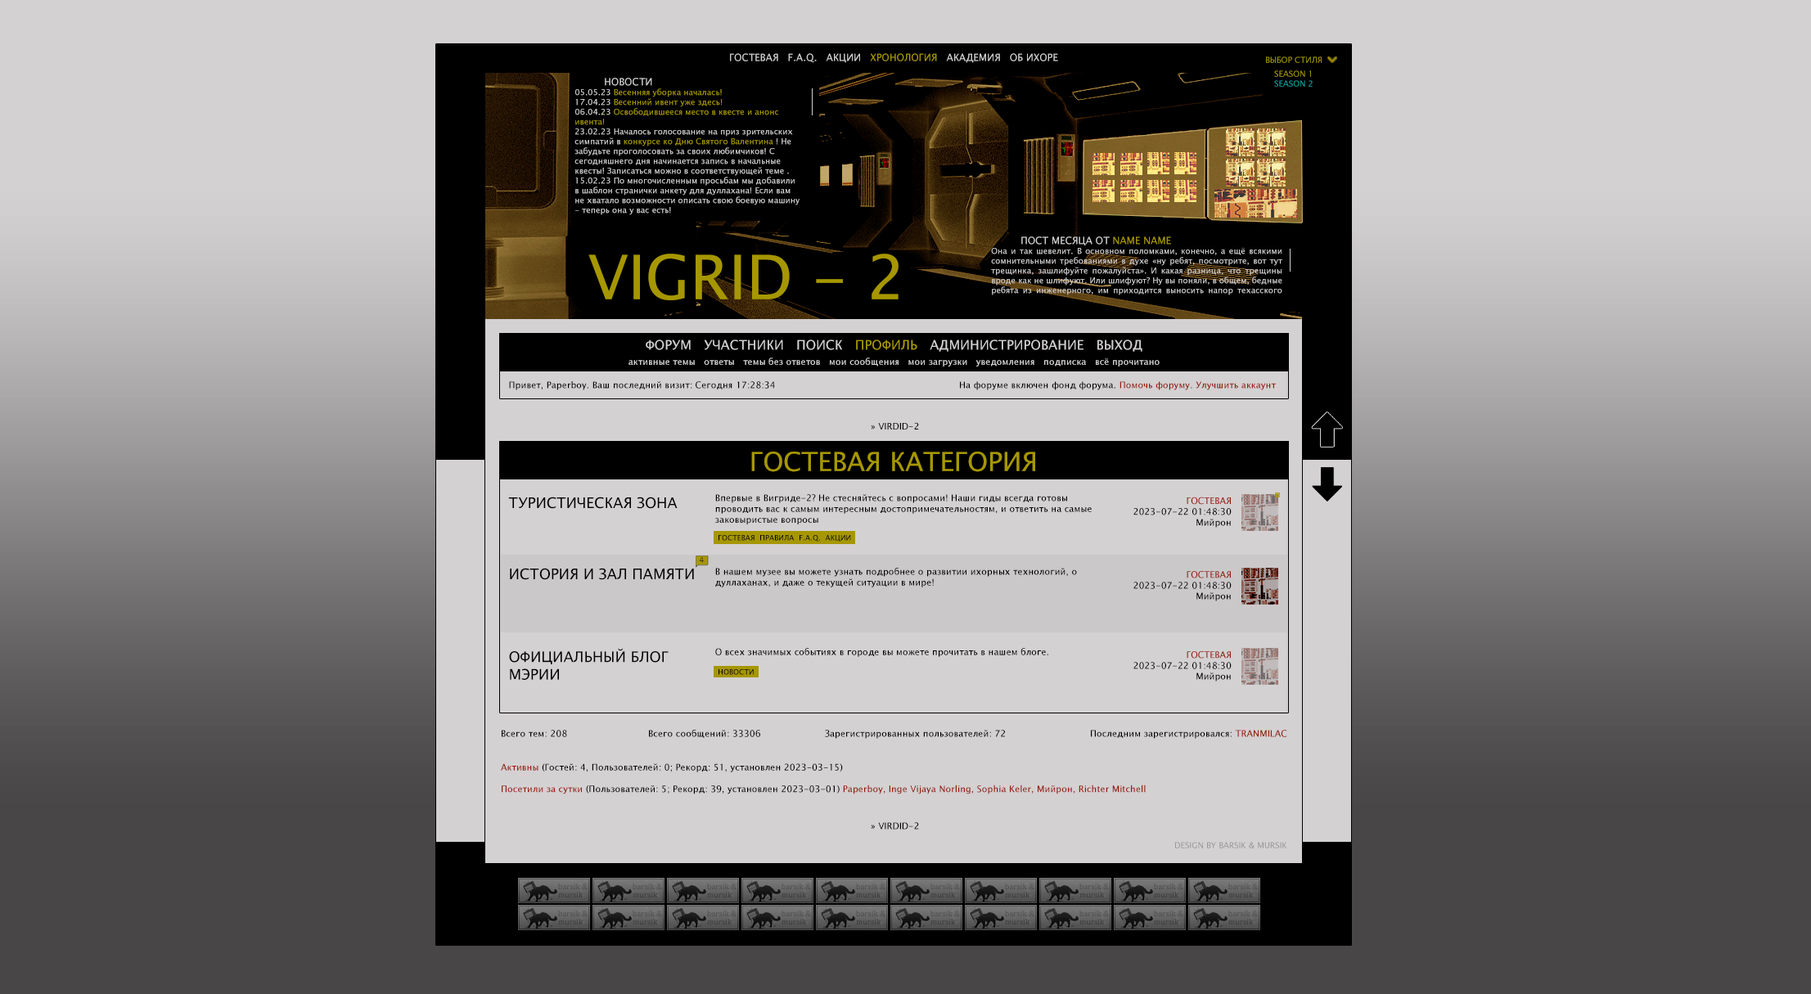
<style>
.page{position:relative;width:1811px;height:994px;background:#d4d1d2}
.page>*{position:absolute;margin:0}
.t1{font:9.8px "LucidaSansUnicode";color:#d4d1d2}
.t2{font:9.8px "LucidaSansUnicode";color:#a69700}
.t3{font:8.2px "LucidaSansUnicode";color:#9f9101}
.t4{font:8.2px "LucidaSansUnicode";color:#d4d1d2}
.t5{font:8.2px "LucidaSansUnicode";color:#a69700}
.t6{font:8.2px "LucidaSansUnicode";color:#019f99}
.t7{font:61.4px "LucidaSansUnicode";color:#a69700}
.t8{font:13.1px "LucidaSansUnicode";color:#d4d1d2}
.t9{font:13.1px "LucidaSansUnicode";color:#a69700}
.t10{font:9px "LucidaSansUnicode";color:#d4d1d2}
.t11{font:9px "LucidaSansUnicode";color:#000000}
.t12{font:9px "LucidaSansUnicode";color:#951b0b}
.t13{font:26.2px "LucidaSansUnicode";color:#a69700}
.t14{font:14.7px "LucidaSansUnicode";color:#000000}
.t15{font:7.4px "LucidaSansUnicode";color:#000000}
.t16{font:9px "AlegreyaSansSC-Regular"}
.t17{font:9px "LucidaSansUnicode"}
.t18{font:8.2px "LucidaSansUnicode";color:#979797}
</style>
<div class="page">
<p class="t1" style="left:730px;top:53px;width:328px;height:10px">ГОСТЕВАЯ   F.A.Q.   АКЦИИ   <span class="t2">ХРОНОЛОГИЯ   </span>АКАДЕМИЯ   ОБ ИХОРЕ</p>
<p class="t3" style="left:1266px;top:56px;width:55px;height:7px">ВЫБОР СТИЛЯ</p>
<p class="t4" style="left:574px;top:78px;width:225px;height:137px"><span class="t1"> НОВОСТИ<br></span>05.05.23 <span class="t5">Весенняя уборка началась!<br></span>17.04.23 <span class="t5">Весенний ивент уже здесь!<br></span>06.04.23 <span class="t5">Освободившееся место в квесте и анонс ивента!<br></span>23.02.23 Началось голосование на приз зрительских симпатий в <span class="t5">конкурсе ко Дню Святого Валентина</span> ! Не забудьте проголосовать за своих любимчиков! С сегодняшнего дня начинается запись в начальные квесты! Записаться можно в соответствующей теме .<br>15.02.23 По многочисленным просьбам мы добавили в шаблон странички анкету для дуллахана! Если вам не хватало возможности описать свою боевую машину - теперь она у вас есть!</p>
<p class="t3" style="left:1274px;top:70px;width:38px;height:17px;text-align:center">SEASON 1<br><span class="t6">SEASON 2</span></p>
<p class="t4" style="left:991px;top:236px;width:291px;height:59px"><span class="t1"> ПОСТ МЕСЯЦА ОТ </span><span class="t2">NAME NAME<br></span>Она и так шевелит. В основном поломками, конечно, а ещё всякими сомнительными требованиями в духе «ну ребят, посмотрите, вот тут трещинка, зашлифуйте пожалуйста». И какая разница, что трещины вроде как не шлифуют. Или шлифуют? Ну вы поняли, в общем, бедные ребята из инженерного, им приходится выносить напор техасского</p>
<p class="t7" style="left:588px;top:254px;width:310px;height:46px">VIGRID - 2</p>
<p class="t7" style="left:588px;top:254px;width:310px;height:46px">VIGRID - 2</p>
<p class="t8" style="left:646px;top:340px;width:496px;height:12px">ФОРУМ   УЧАСТНИКИ   ПОИСК   <span class="t9">ПРОФИЛЬ   </span>АДМИНИСТРИРОВАНИЕ   ВЫХОД</p>
<p class="t10" style="left:628px;top:358px;width:531px;height:9px">активные темы   ответы   темы без ответов   мои сообщения   мои загрузки   уведомления   подписка   всё прочитано</p>
<p class="t11" style="left:509px;top:381px;width:767px;height:9px">Привет, Paperboy. Ваш последний визит: Сегодня 17:28:34         На форуме включен фонд форума. <span class="t12">Помочь форуму. Улучшить аккаунт</span></p>
<p class="t13" style="left:751px;top:452px;width:284px;height:20px">ГОСТЕВАЯ КАТЕГОРИЯ</p>
<p class="t14" style="left:508px;top:497px;width:169px;height:12px">ТУРИСТИЧЕСКАЯ ЗОНА</p>
<p class="t11" style="left:715px;top:494px;width:376px;height:30px">Впервые в Вигриде-2? Не стесняйтесь с вопросами! Наши гиды всегда готовы проводить вас к самым интересным достопримечательностям, и ответить на самые заковыристые вопросы</p>
<p class="t11" style="left:1133px;top:497px;width:98px;height:31px;text-align:right"><span class="t12">ГОСТЕВАЯ<br></span>2023-07-22 01:48:30<br>Мийрон</p>
<p class="t15" style="left:718px;top:535px;width:133px;height:7px">ГОСТЕВАЯ  ПРАВИЛА  F.A.Q.  АКЦИИ</p>
<p class="t16" style="left:700px;top:557px;width:4px;height:6px">4</p>
<p class="t14" style="left:510px;top:568px;width:184px;height:12px">ИСТОРИЯ И ЗАЛ ПАМЯТИ</p>
<p class="t11" style="left:715px;top:567px;width:362px;height:20px">В нашем музее вы можете узнать подробнее о развитии ихорных технологий, о дуллаханах, и даже о текущей ситуации в мире!</p>
<p class="t17" style="left:1133px;top:571px;width:98px;height:30px;text-align:right">ГОСТЕВАЯ<br>2023-07-22 01:48:30<br>Мийрон</p>
<p class="t14" style="left:509px;top:648px;width:159px;height:32px">ОФИЦИАЛЬНЫЙ БЛОГ МЭРИИ</p>
<p class="t11" style="left:715px;top:648px;width:333px;height:9px">О всех значимых событиях в городе вы можете прочитать в нашем блоге.</p>
<p class="t17" style="left:1133px;top:651px;width:98px;height:31px;text-align:right">ГОСТЕВАЯ<br>2023-07-22 01:48:30<br>Мийрон</p>
<p class="t15" style="left:718px;top:669px;width:36px;height:6px">НОВОСТИ</p>
<p class="t11" style="left:502px;top:729px;width:785px;height:10px">Всего тем: 208    Всего сообщений: 33306    Зарегистрированных пользователей: 72    Последним зарегистрировался: <span class="t12">TRANMILAC</span></p>
<p class="t12" style="left:501px;top:763px;width:644px;height:31px">Активны <span class="t11">(Гостей: 4, Пользователей: 0; Рекорд: 51, установлен 2023-03-15)<br><br></span>Посетили за сутки<span class="t11"> (Пользователей: 5; Рекорд: 39, установлен 2023-03-01) </span>Paperboy, Inge Vijaya Norling, Sophia Keler, Мийрон, Richter Mitchell</p>
<p class="t18" style="left:1175px;top:842px;width:112px;height:6px">DESIGN BY BARSIK &amp; MURSIK</p>
</div>
